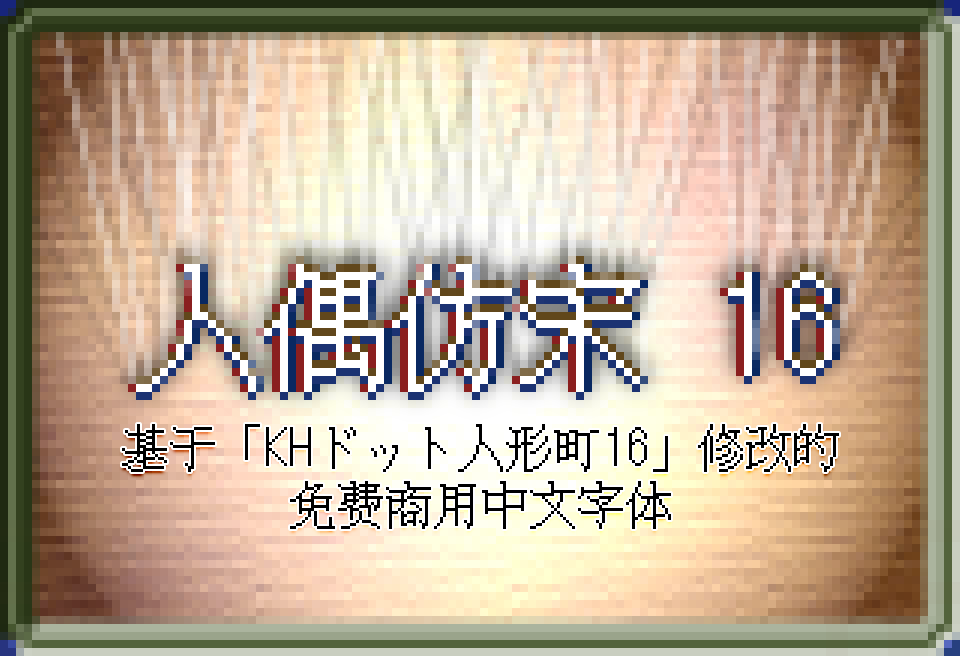
<style>
.page{position:relative;width:960px;height:656px}
.page>*{position:absolute;margin:0}
.t1{font:128px "RenOuFangSong-16";color:#ffffff}
.t2{font:128px "RenOuFangSong-16"}
.t3{font:48px "RenOuFangSong-16";color:#000000}
</style>
<div class="page">
<p class="t1" style="left:136px;top:264px;width:696px;height:128px">人偶仿宋 16</p>
<p class="t2" style="left:144px;top:264px;width:696px;height:128px">人偶仿宋 16</p>
<p class="t3" style="left:122px;top:424px;width:717px;height:105px;text-align:center">基于「KHドット人形町16」修改的<br>免费商用中文字体</p>
</div>
